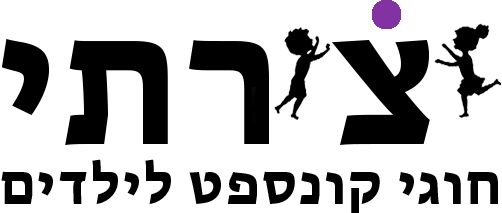
<style>
.page{position:relative;width:502px;height:213px;background:#ffffff}
.page>*{position:absolute;margin:0}
.t1{font:187px "MyriadHebrew-Bold";letter-spacing:0.04em;color:#000000}
.t2{font:58px "MyriadHebrew-Bold";letter-spacing:0.04em;color:#000000}
</style>
<div class="page">
<p class="t1" style="left:1px;top:39px;width:429px;height:106px">צ רתי</p>
<p class="t2" style="left:1px;top:159px;width:497px;height:56px">חוגי קונספט לילדים</p>
</div>
